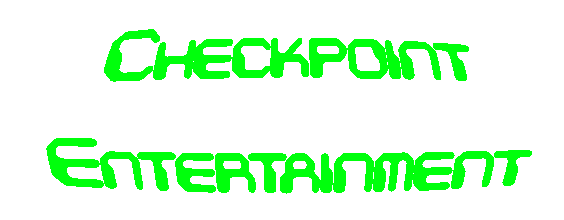
<style>
.page{position:relative;width:564px;height:220px;background:#ffffff}
.page>*{position:absolute;margin:0}
.t1{font:66.7px/100px "ChintzyCPUBRK";color:#00ff0c}
</style>
<div class="page">
<p class="t1" style="left:46px;top:29px;width:486px;height:165px;text-align:center">Checkpoint<br>Entertainment</p>
</div>
